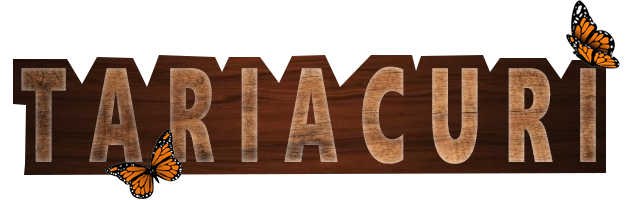
<style>
.page{position:relative;width:626px;height:200px;background:#ffffff}
.page>*{position:absolute;margin:0}
.t1{font:133.7px "SegoeUIBlack";letter-spacing:0.3em;scale:0.54 1}
</style>
<div class="page">
<p class="t1" style="left:21px;top:66px;width:575px;height:98px">TARIACURI</p>
</div>
